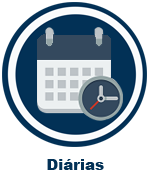
<style>
.page{position:relative;width:150px;height:184px;background:#ffffff}
.page>*{position:absolute;margin:0}
.t1{font:15px "Arial-Black";color:#023156}
</style>
<div class="page">
<p class="t1" style="left:47px;top:159px;width:57px;height:11px">Diárias</p>
</div>
